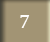
<style>
.page{position:relative;width:50px;height:42px;background:#a29474}
.page>*{position:absolute;margin:0}
.t1{font:20px "CambriaMath";color:#fdfcfb}
</style>
<div class="page">
<p class="t1" style="left:20px;top:15px;width:10px;height:13px">7</p>
</div>
